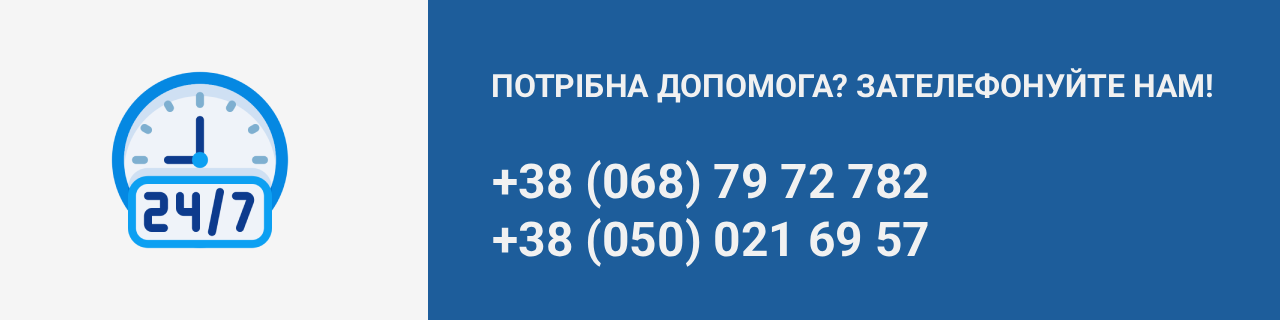
<style>
.page{position:relative;width:1280px;height:320px;background:#1d5d9b}
.page>*{position:absolute;margin:0}
.t1{font:32px "Roboto-Bold";color:#f1f1f1}
.t2{font:48px "Roboto-Bold";color:#f1f1f1}
</style>
<div class="page">
<p class="t1" style="left:493px;top:68px;width:719px;height:35px">ПОТРІБНА ДОПОМОГА? ЗАТЕЛЕФОНУЙТЕ НАМ!</p>
<p class="t2" style="left:493px;top:160px;width:435px;height:107px">+38 (068) 79 72 782<br>+38 (050) 021 69 57</p>
</div>
